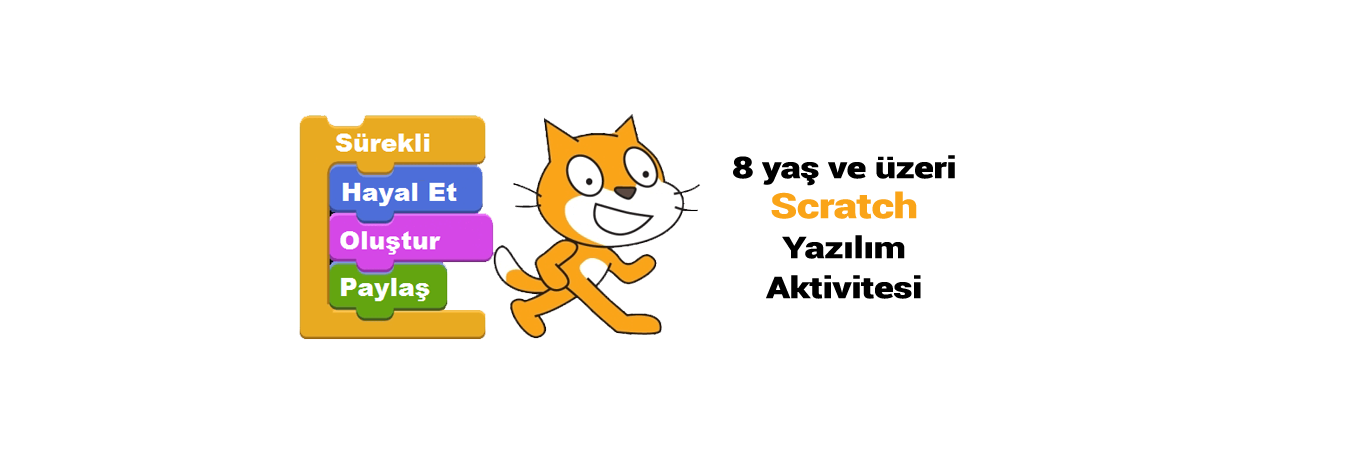
<style>
.page{position:relative;width:1351px;height:455px;background:#ffffff}
.page>*{position:absolute;margin:0}
.t1{font:30px/40px "Roboto-Black";letter-spacing:-0.01em;color:#000000;scale:1.25 1}
.t2{font:35px/40px "Roboto-Black";letter-spacing:-0.01em;color:#faa418;scale:1.25 1}
</style>
<div class="page">
<p class="t1" style="left:733px;top:155px;width:222px;height:144px;text-align:center">8 yaş ve üzeri<br><span class="t2">Scratch<br></span>Yazılım<br>Aktivitesi</p>
</div>
